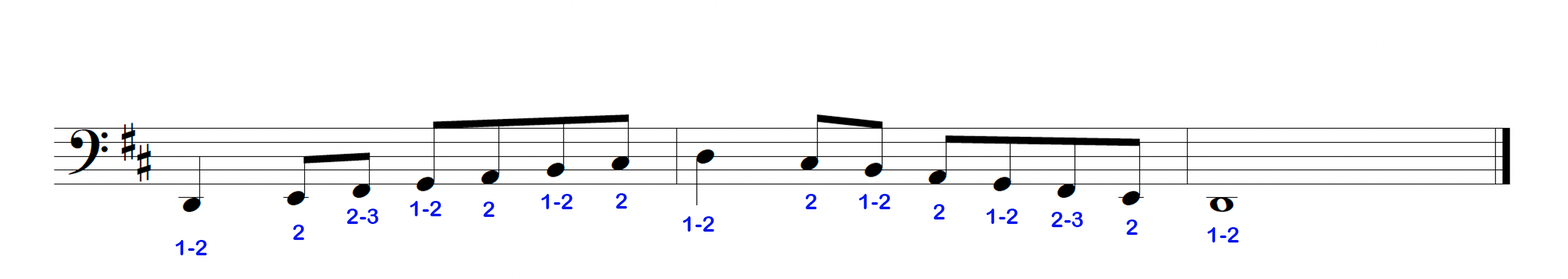
<style>
.page{position:relative;width:1568px;height:279px;background:#ffffff}
.page>*{position:absolute;margin:0}
.t1{font:21.8px "ArialRoundedMTBold";color:#0417ec}
</style>
<div class="page">
<p class="t1" style="left:541px;top:194px;width:32px;height:15px">1-2</p>
<p class="t1" style="left:616px;top:193px;width:11px;height:16px">2</p>
<p class="t1" style="left:805px;top:194px;width:12px;height:15px">2</p>
<p class="t1" style="left:859px;top:194px;width:31px;height:15px">1-2</p>
<p class="t1" style="left:347px;top:209px;width:32px;height:15px">2-3</p>
<p class="t1" style="left:410px;top:201px;width:31px;height:15px">1-2</p>
<p class="t1" style="left:483px;top:202px;width:11px;height:15px">2</p>
<p class="t1" style="left:933px;top:204px;width:12px;height:16px">2</p>
<p class="t1" style="left:986px;top:209px;width:32px;height:15px">1-2</p>
<p class="t1" style="left:683px;top:216px;width:31px;height:16px">1-2</p>
<p class="t1" style="left:1051px;top:212px;width:32px;height:15px">2-3</p>
<p class="t1" style="left:1126px;top:220px;width:12px;height:15px">2</p>
<p class="t1" style="left:293px;top:225px;width:11px;height:15px">2</p>
<p class="t1" style="left:1207px;top:227px;width:32px;height:16px">1-2</p>
<p class="t1" style="left:176px;top:240px;width:31px;height:16px">1-2</p>
</div>
